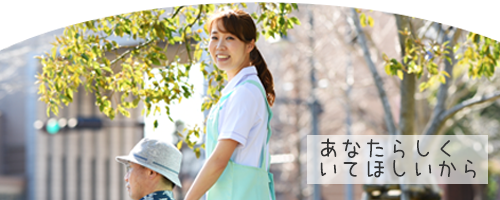
<style>
.page{position:relative;width:500px;height:200px}
.page>*{position:absolute;margin:0}
.t1{font:24px/20px "uzura_font";letter-spacing:-0.01em;color:#333333}
</style>
<div class="page">
<p class="t1" style="left:320px;top:138px;width:156px;height:40px">あなたらしく<br>いてほしいから</p>
</div>
